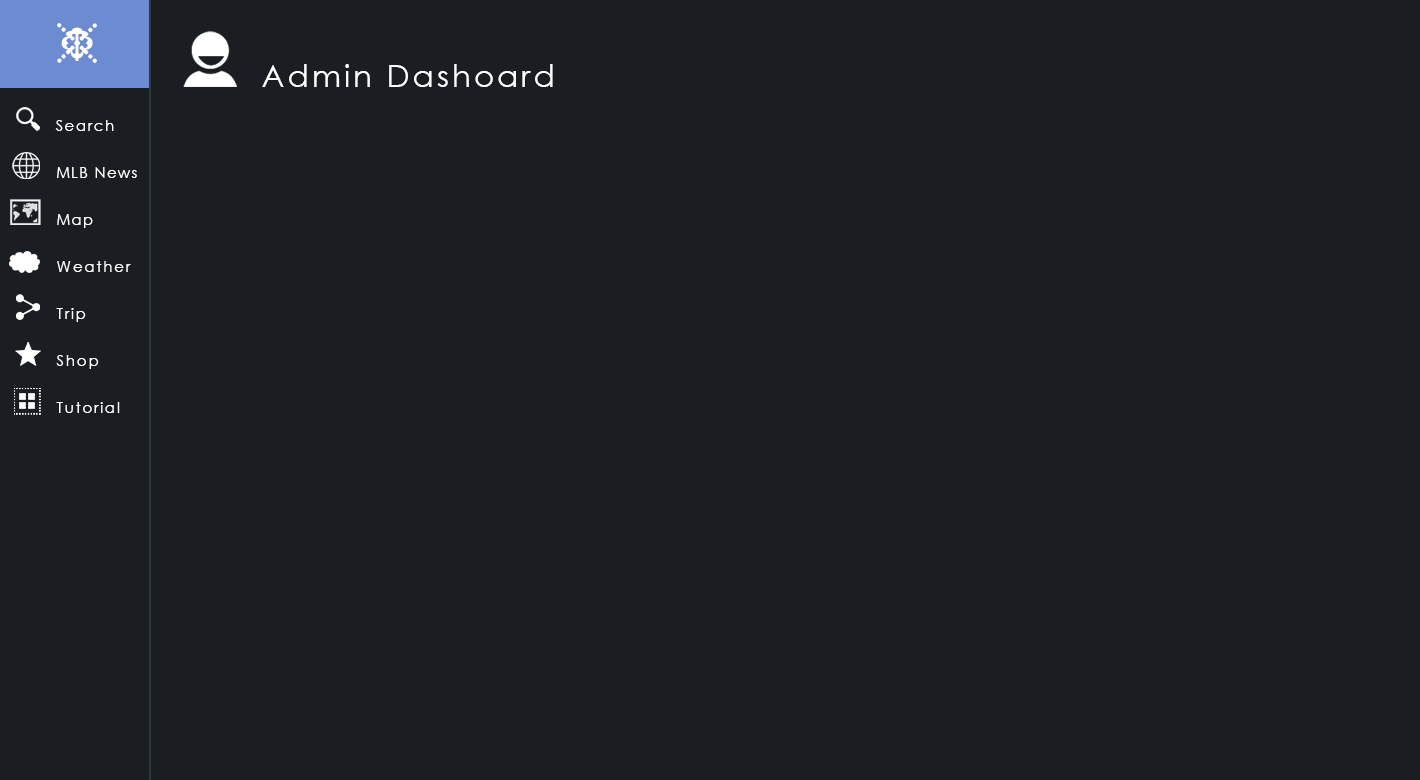
<style>
.page{position:relative;width:1420px;height:780px;background:#1a1e23}
.page>*{position:absolute;margin:0}
.t1{font:10px "CenturyGothic";letter-spacing:0.1em;color:#ffffff}
.t2{font:30.7px "CenturyGothic";letter-spacing:0.1em;color:#ffffff}
.t3{font:15px "CenturyGothic";letter-spacing:0.1em;color:#ffffff}
.t4{font:14.6px "CenturyGothic";letter-spacing:0.1em;color:#ffffff}
.t5{font:15.5px "CenturyGothic";letter-spacing:0.1em;color:#ffffff}
</style>
<div class="page">
<p class="t1" style="left:68px;top:31px;width:18px;height:30px">T</p>
<p class="t2" style="left:262px;top:64px;width:291px;height:23px">Admin Dashoard</p>
<p class="t3" style="left:55px;top:120px;width:59px;height:11px">Search</p>
<p class="t4" style="left:57px;top:167px;width:80px;height:11px">MLB News</p>
<p class="t4" style="left:57px;top:214px;width:36px;height:14px">Map</p>
<p class="t5" style="left:57px;top:261px;width:74px;height:11px">Weather</p>
<p class="t5" style="left:56px;top:308px;width:30px;height:14px">Trip</p>
<p class="t5" style="left:56px;top:355px;width:43px;height:14px">Shop</p>
<p class="t5" style="left:56px;top:402px;width:64px;height:11px">Tutorial</p>
</div>
